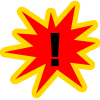
<style>
.page{position:relative;width:100px;height:100px;background:#ffffff}
.page>*{position:absolute;margin:0}
.t1{font:42.1px "Impact";color:#000000}
</style>
<div class="page">
<p class="t1" style="left:50px;top:33px;width:10px;height:33px">!</p>
</div>
